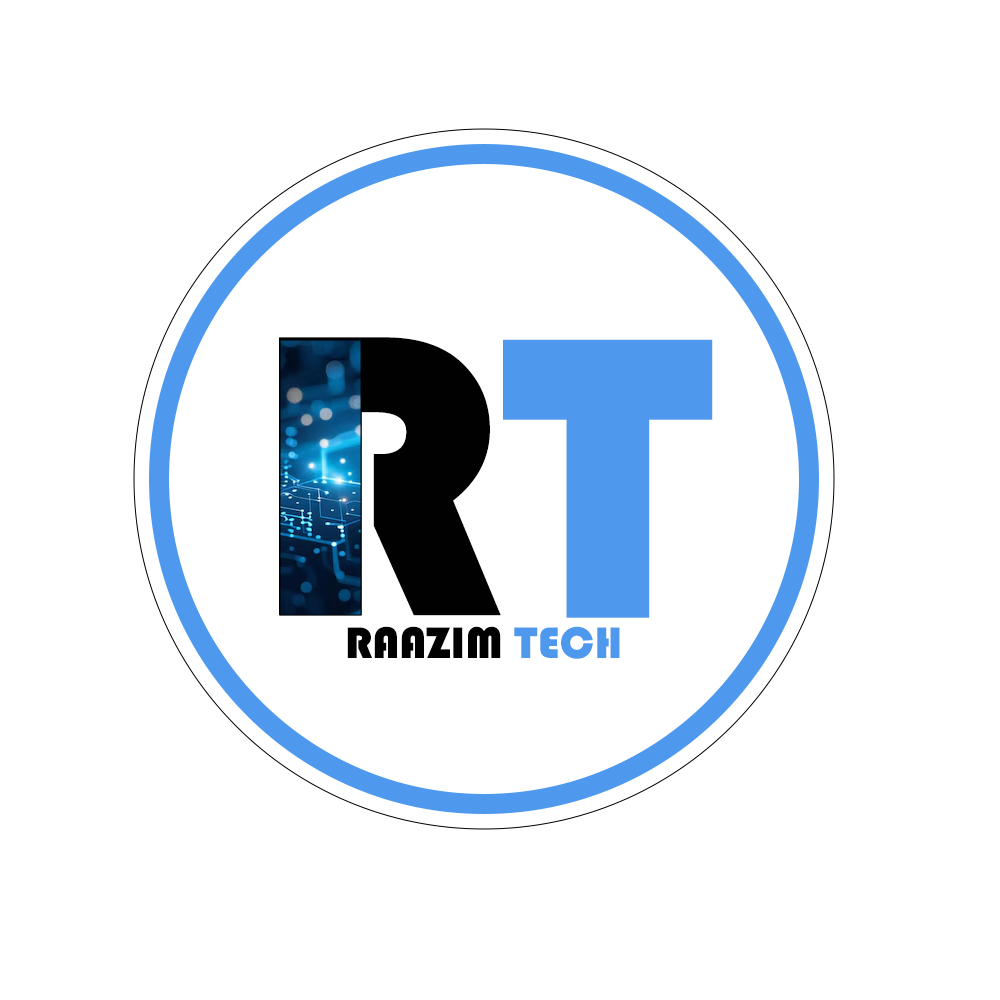
<style>
.page{position:relative;width:1000px;height:1000px;background:#ffffff}
.page>*{position:absolute;margin:0}
.t1{font:416.7px "Bauhaus93";text-transform:uppercase}
.t2{font:416.7px "Bauhaus93";color:#4e99ed;text-transform:uppercase}
.t3{font:45.8px "Bauhaus93";color:#010101;text-transform:uppercase}
.t4{font:45.8px "Bauhaus93";color:#4e99ed;text-transform:uppercase}
</style>
<div class="page">
<p class="t1" style="left:279px;top:337px;width:222px;height:279px">r</p>
<p class="t2" style="left:503px;top:339px;width:210px;height:279px">t</p>
<p class="t3" style="left:347px;top:626px;width:273px;height:33px">raazim <span class="t4">tech</span></p>
</div>
